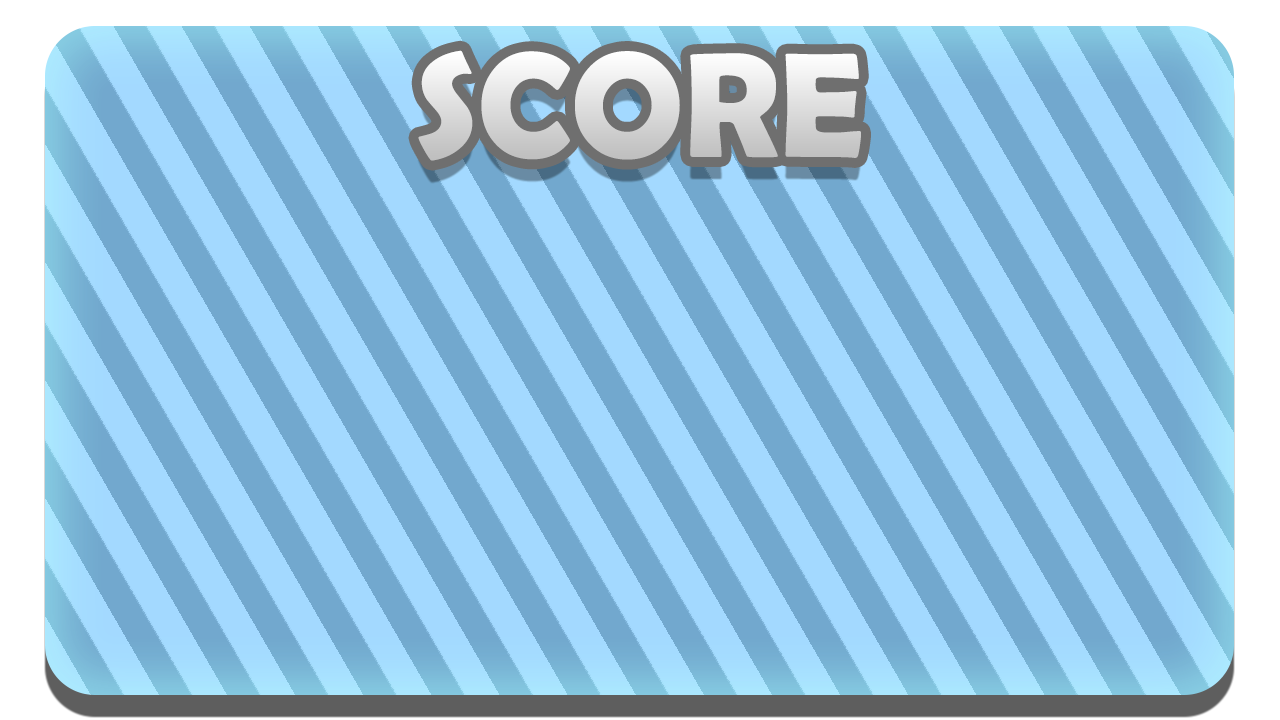
<style>
.page{position:relative;width:1280px;height:720px;background:#a3d9ff}
.page>*{position:absolute;margin:0}
.t1{font:150px "BerlinSansFBDemi-Bold"}
</style>
<div class="page">
<p class="t1" style="left:418px;top:50px;width:443px;height:111px">SCORE</p>
</div>
